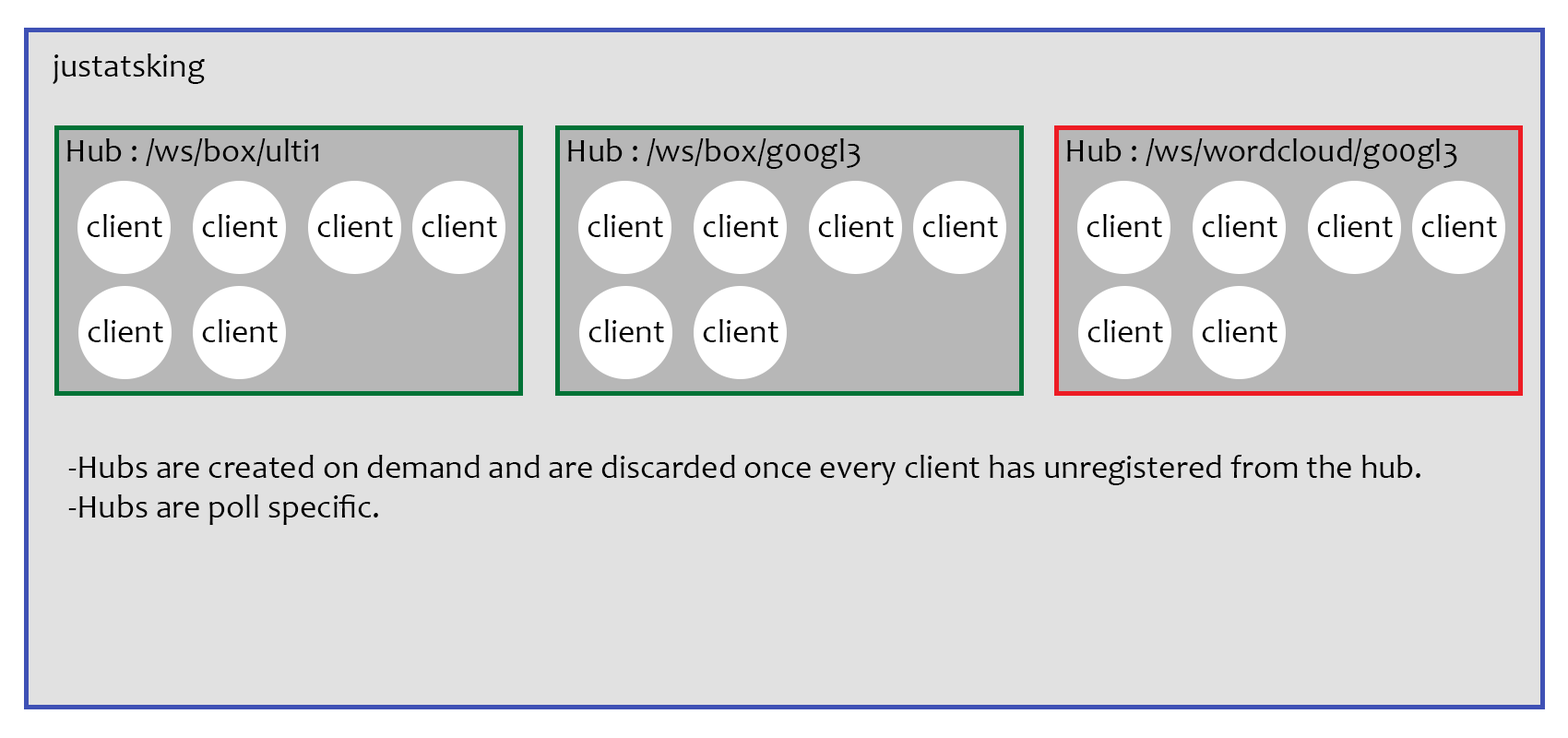
<style>
.page{position:relative;width:1568px;height:738px;background:#e1e1e1}
.page>*{position:absolute;margin:0}
.t1{font:33.2px "Candara";color:#000000}
.t2{font:33.2px "Candara";color:#010101}
</style>
<div class="page">
<p class="t1" style="left:53px;top:53px;width:152px;height:31px">justatsking</p>
<p class="t1" style="left:67px;top:138px;width:251px;height:28px">Hub : /ws/box/ulti1</p>
<p class="t1" style="left:568px;top:138px;width:293px;height:31px">Hub : /ws/box/g00gl3</p>
<p class="t1" style="left:1067px;top:138px;width:390px;height:31px">Hub : /ws/wordcloud/g00gl3</p>
<p class="t1" style="left:87px;top:214px;width:75px;height:23px">client</p>
<p class="t1" style="left:202px;top:214px;width:76px;height:23px">client</p>
<p class="t1" style="left:317px;top:214px;width:76px;height:23px">client</p>
<p class="t2" style="left:422px;top:214px;width:75px;height:23px">client</p>
<p class="t1" style="left:588px;top:214px;width:75px;height:23px">client</p>
<p class="t1" style="left:703px;top:214px;width:75px;height:23px">client</p>
<p class="t1" style="left:818px;top:214px;width:76px;height:23px">client</p>
<p class="t2" style="left:922px;top:214px;width:76px;height:23px">client</p>
<p class="t1" style="left:1087px;top:214px;width:75px;height:23px">client</p>
<p class="t1" style="left:1202px;top:214px;width:75px;height:23px">client</p>
<p class="t1" style="left:1317px;top:214px;width:76px;height:23px">client</p>
<p class="t2" style="left:1421px;top:214px;width:76px;height:23px">client</p>
<p class="t1" style="left:88px;top:319px;width:75px;height:23px">client</p>
<p class="t1" style="left:202px;top:319px;width:76px;height:23px">client</p>
<p class="t1" style="left:588px;top:319px;width:76px;height:23px">client</p>
<p class="t1" style="left:703px;top:319px;width:75px;height:23px">client</p>
<p class="t1" style="left:1087px;top:319px;width:76px;height:23px">client</p>
<p class="t1" style="left:1202px;top:319px;width:75px;height:23px">client</p>
<p class="t1" style="left:68px;top:455px;width:1352px;height:70px">-Hubs are created on demand and are discarded once every client has unregistered from the hub.<br>-Hubs are poll specific.</p>
</div>
